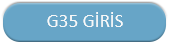
<style>
.page{position:relative;width:170px;height:45px;background:#67a5c7}
.page>*{position:absolute;margin:0}
.t1{font:19px "Calibri";color:#f8f8f8}
</style>
<div class="page">
<p class="t1" style="left:47px;top:12px;width:76px;height:15px">G35 GİRİS</p>
</div>
